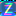
<style>
.page{position:relative;width:16px;height:16px}
.page>*{position:absolute;margin:0}
.t1{font:19.4px "MyriadPro-Regular"}
</style>
<div class="page">
<p class="t1" style="left:4px;top:3px;width:8px;height:10px">z</p>
</div>
